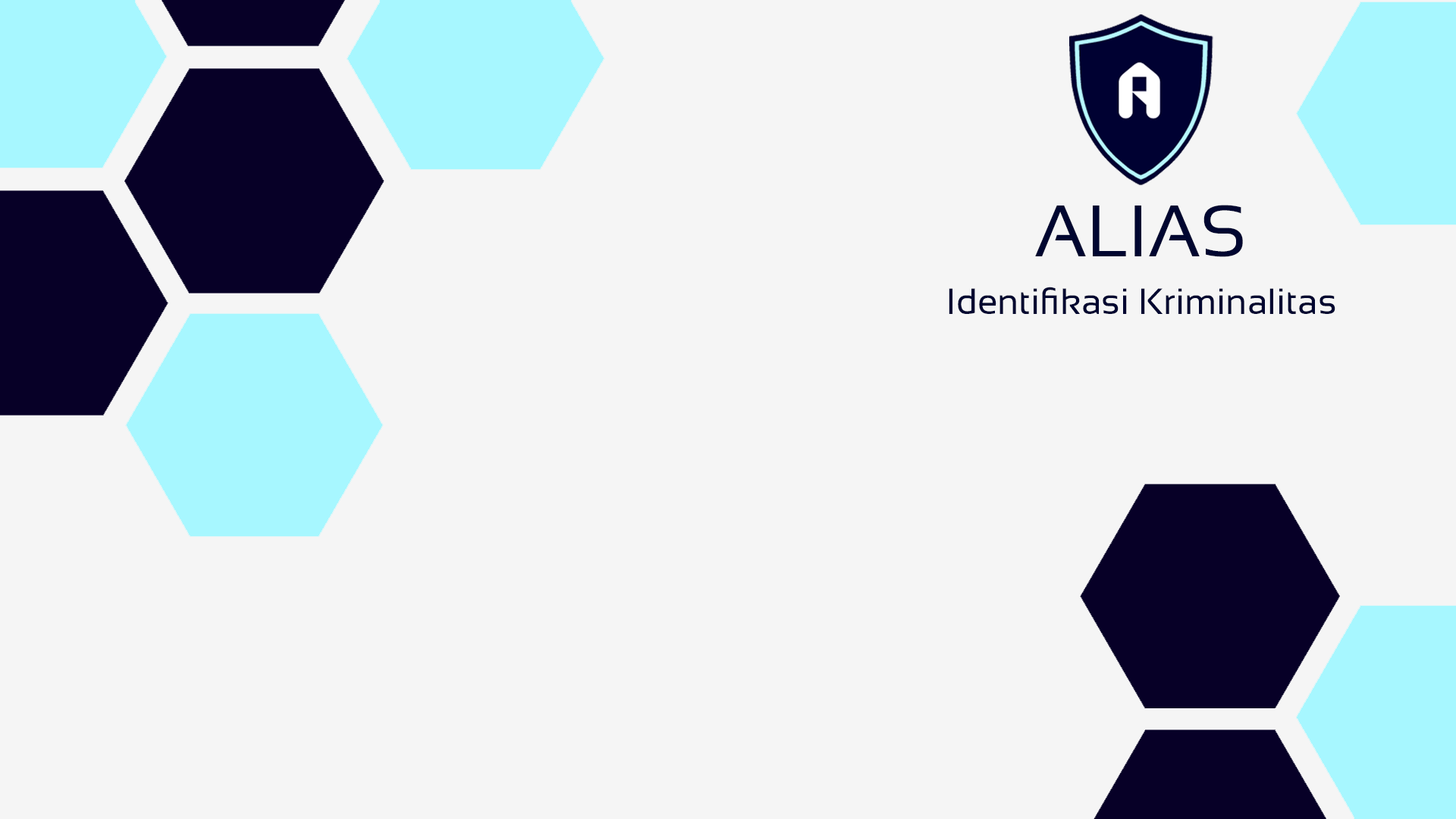
<style>
.page{position:relative;width:1456px;height:819px;background:#f5f5f5}
.page>*{position:absolute;margin:0}
.t1{font:72.8px "Sansation-Regular";color:#000630}
.t2{font:36.4px "Sansation-Regular";color:#000630}
</style>
<div class="page">
<p class="t1" style="left:1035px;top:205px;width:208px;height:52px">ALIAS</p>
<p class="t2" style="left:949px;top:287px;width:386px;height:27px">Identifikasi Kriminalitas</p>
</div>
